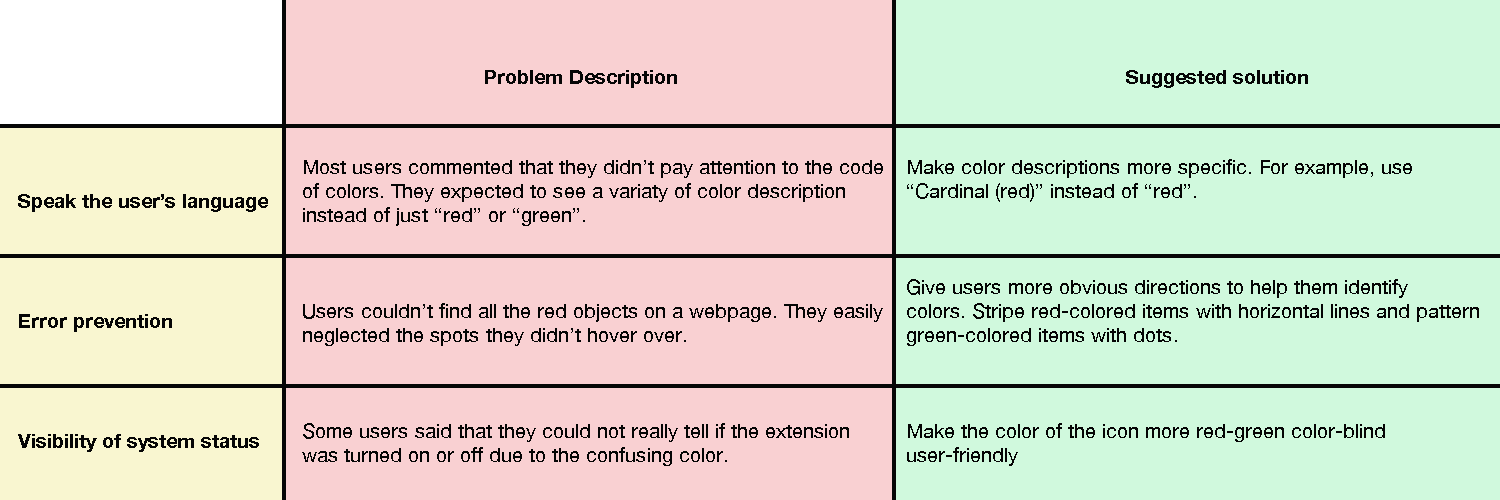
<style>
.page{position:relative;width:1500px;height:500px;background:#f9d0d2}
.page>*{position:absolute;margin:0}
.t1{font:20px "HelveticaNeue-Bold";color:#060606}
.t2{font:20px "HelveticaNeue";color:#050505}
</style>
<div class="page">
<p class="t1" style="left:485px;top:70px;width:823px;height:18px">Problem Description                 Suggested solution</p>
<p class="t2" style="left:302px;top:160px;width:581px;height:306px">Most users commented that they didn’t pay attention to the code     <br>of colors. They expected to see a variaty of color description<br>instead of just “red” or “green”.<br><br><br><br>Users couldn’t find all the red objects on a webpage. They easily<br>neglected the spots they didn’t hover over. <br><br><br><br>Some users said that they could not really tell if the extension<br>was turned on or off due to the confusing color.</p>
<p class="t2" style="left:907px;top:159px;width:572px;height:307px">Make color descriptions more specific. For example, use<br>“Cardinal (red)” instead of “red”.<br><br><br><br>Give users more obvious directions to help them identify <br>colors. Stripe red-colored items with horizontal lines and pattern<br>green-colored items with dots.<br><br><br><br>Make the color of the icon more red-green color-blind <br>user-friendly</p>
<p class="t1" style="left:18px;top:194px;width:250px;height:258px">Speak the user’s language<br><br><br><br><br>Error prevention<br><br><br><br><br>Visibility of system status</p>
</div>
